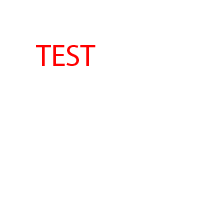
<style>
.page{position:relative;width:200px;height:200px;background:#ffffff}
.page>*{position:absolute;margin:0}
.t1{font:30px "MyriadPro-Regular";color:#ff0000}
</style>
<div class="page">
<p class="t1" style="left:36px;top:45px;width:60px;height:21px">TEST</p>
</div>
